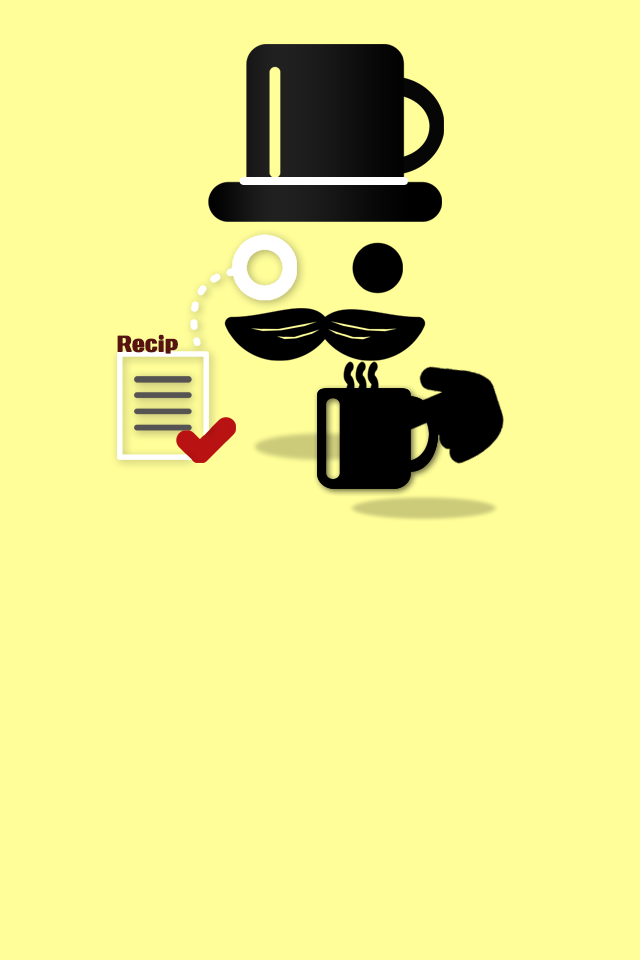
<style>
.page{position:relative;width:640px;height:960px;background:#fffe99}
.page>*{position:absolute;margin:0}
.t1{font:18.6px "KoreanBRSG-R";color:#591212;font-weight:bold}
</style>
<div class="page">
<p class="t1" style="left:117px;top:334px;width:61px;height:20px">Recip</p>
</div>
